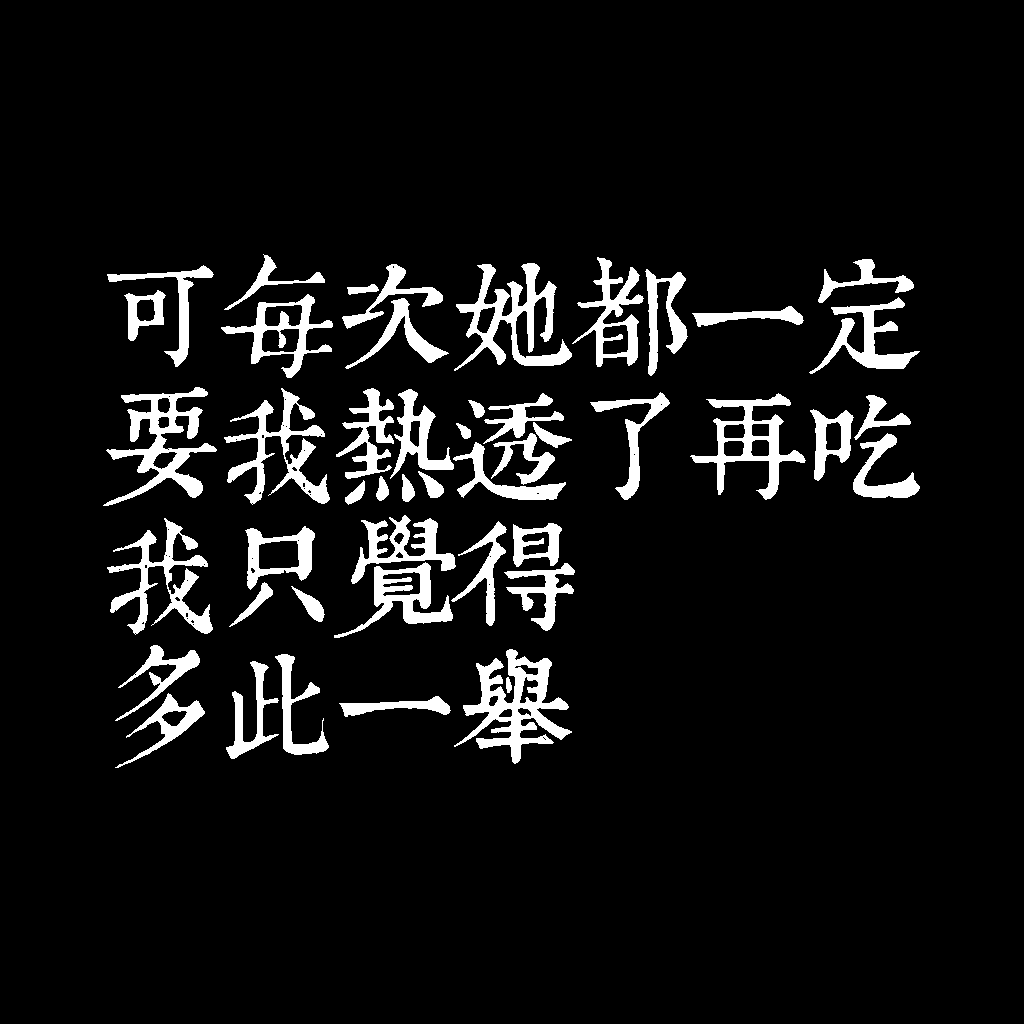
<style>
.page{position:relative;width:1024px;height:1024px;background:#000000}
.page>*{position:absolute;margin:0}
.t1{font:120px/130px "TpldKhangXiDictTrial";letter-spacing:-0.02em;color:#ffffff}
</style>
<div class="page">
<p class="t1" style="left:103px;top:254px;width:817px;height:514px">可每次她都一定<br>要我熱透了再吃<br>我只覺得<br>多此一舉</p>
</div>
